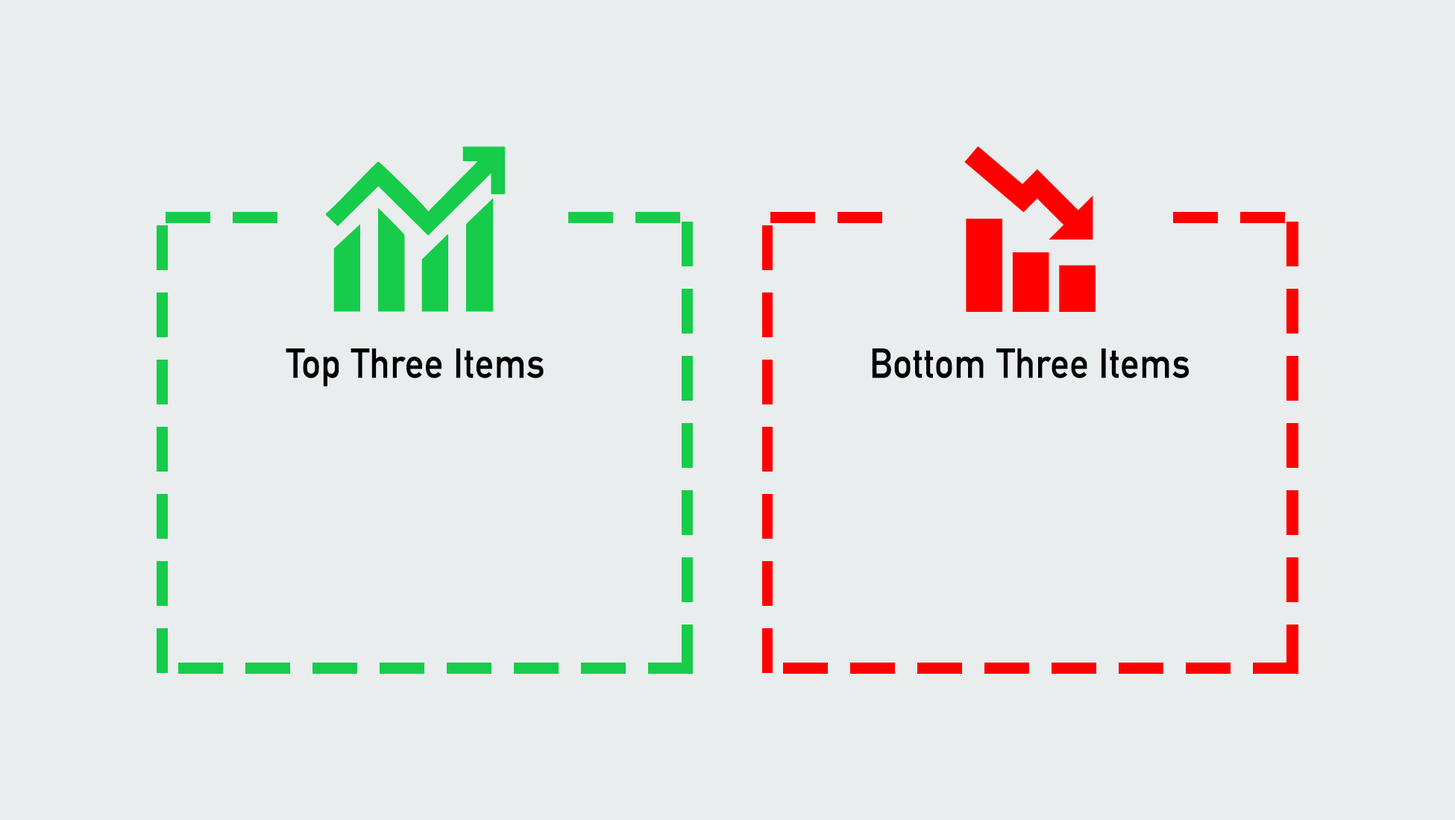
<style>
.page{position:relative;width:1455px;height:820px;background:#e9edee}
.page>*{position:absolute;margin:0}
.t1{font:41px "DINAlternate-Bold";letter-spacing:0.02em;color:#000000;scale:0.91 1}
</style>
<div class="page">
<p class="t1" style="left:286px;top:348px;width:258px;height:38px">Top Three Items</p>
<p class="t1" style="left:872px;top:348px;width:317px;height:30px">Bottom Three Items</p>
</div>
